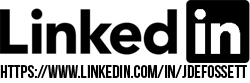
<style>
.page{position:relative;width:250px;height:83px;background:#ffffff}
.page>*{position:absolute;margin:0}
.t1{font:18px "BebasNeue";color:#000000}
</style>
<div class="page">
<p class="t1" style="left:0px;top:65px;width:247px;height:13px">https://www.linkedin.com/in/jdefossett</p>
</div>
